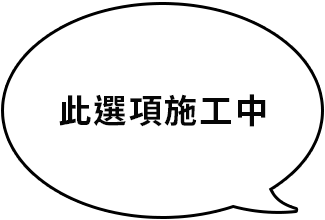
<style>
.page{position:relative;width:325px;height:220px;background:#ffffff}
.page>*{position:absolute;margin:0}
.t1{font:33.3px "NotoSansCJKtc-Bold";letter-spacing:0.06em;color:#060606}
</style>
<div class="page">
<p class="t1" style="left:59px;top:94px;width:207px;height:33px">此選項施工中</p>
</div>
